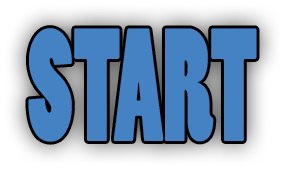
<style>
.page{position:relative;width:286px;height:171px;background:#4582c3}
.page>*{position:absolute;margin:0}
.t1{font:150px "PoplarStd";color:#4582c3;scale:0.67 1}
</style>
<div class="page">
<p class="t1" style="left:28px;top:28px;width:229px;height:114px">START</p>
</div>
